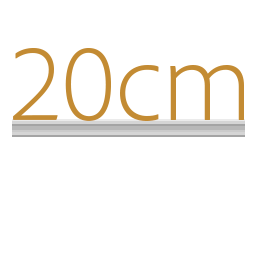
<style>
.page{position:relative;width:256px;height:256px;background:#ffffff}
.page>*{position:absolute;margin:0}
.t1{font:110.8px "AdobeClean-Light";color:#c38b33}
</style>
<div class="page">
<p class="t1" style="left:13px;top:48px;width:231px;height:73px">20cm</p>
</div>
